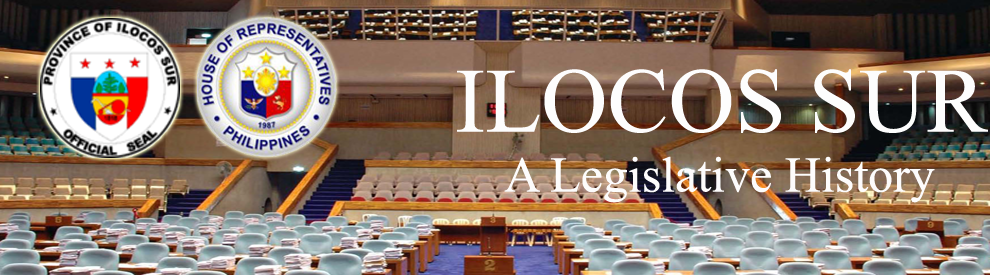
<style>
.page{position:relative;width:990px;height:275px}
.page>*{position:absolute;margin:0}
.t1{font:50px "TimesNewRomanPSMT";color:#fdfcfc}
.t2{font:91.7px "TimesNewRomanPSMT";color:#fdfdfd}
</style>
<div class="page">
<p class="t1" style="left:457px;top:69px;width:531px;height:134px;text-align:center"><span class="t2">ILOCOS SUR<br></span>A Legislative History</p>
</div>
